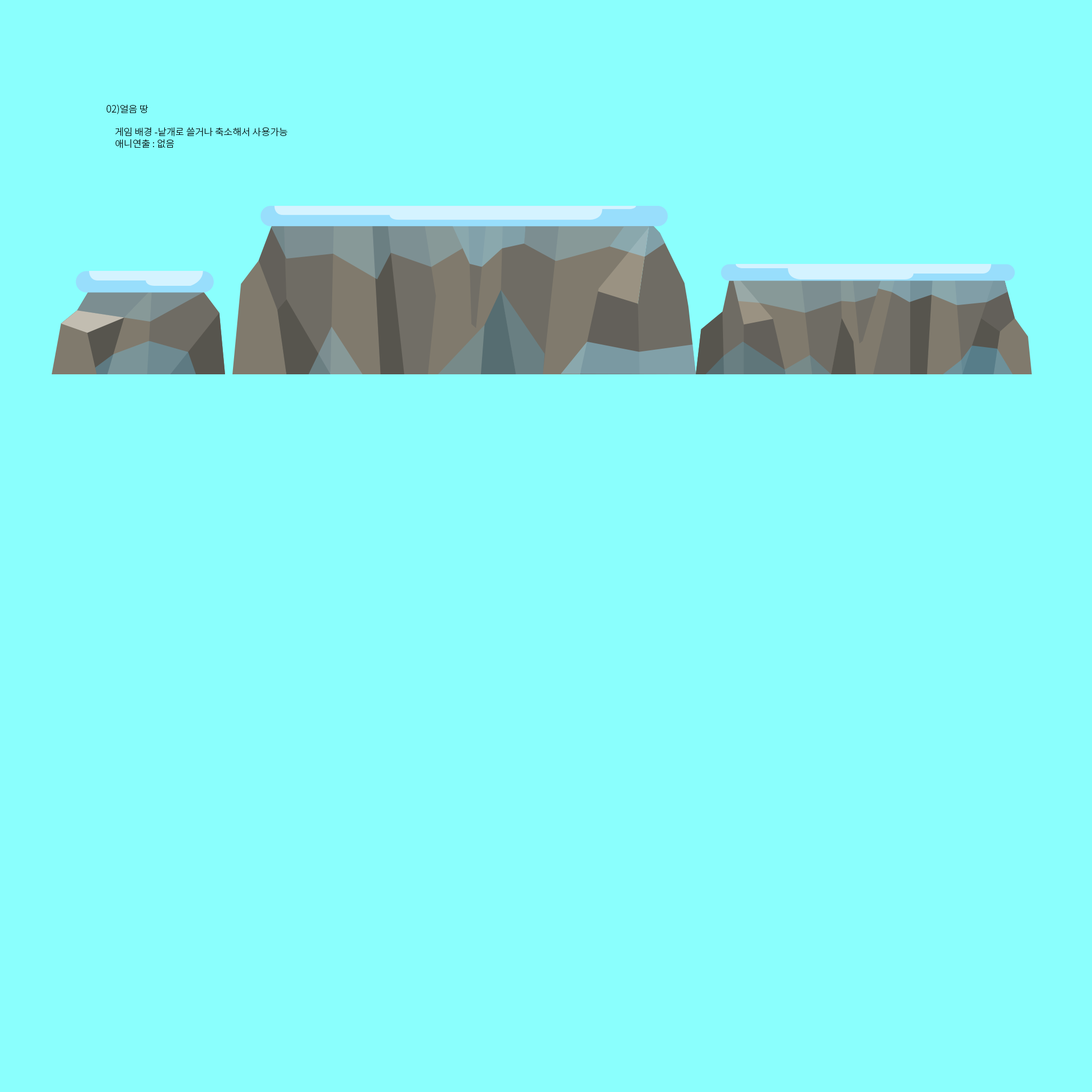
<style>
.page{position:relative;width:1092px;height:1092px;background:#8afffd}
.page>*{position:absolute;margin:0}
.t1{font:9.6px "NotoSansCJKkr-Light";color:#000000}
</style>
<div class="page">
<p class="t1" style="left:107px;top:105px;width:180px;height:43px">02)얼음 땅<br>    <br>    게임 배경 -낱개로 쓸거나 축소해서 사용가능<br>    애니연출 : 없음</p>
</div>
